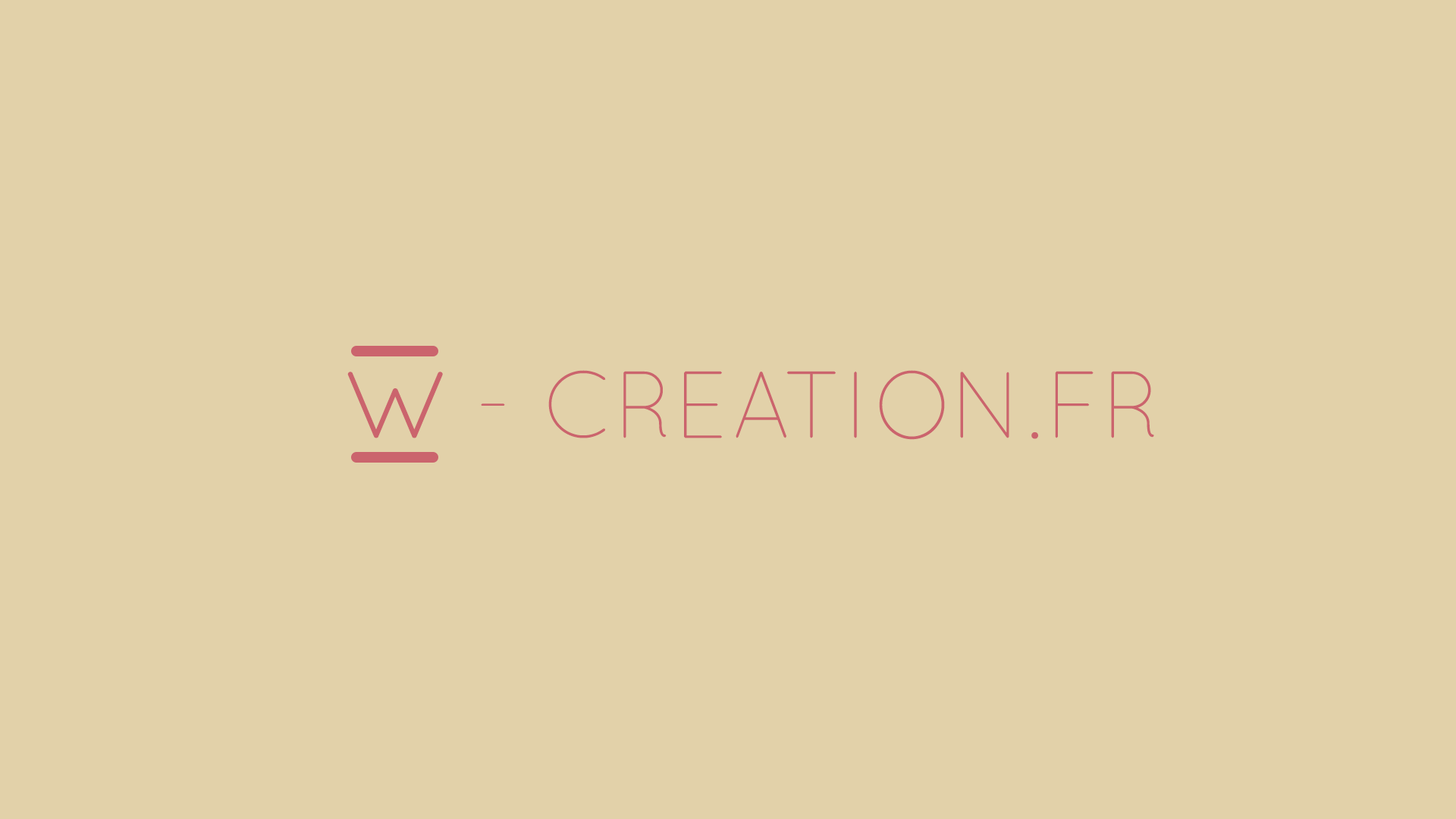
<style>
.page{position:relative;width:1456px;height:819px;background:#e2d1a9}
.page>*{position:absolute;margin:0}
.t1{font:94.8px "QuicksandLight-Regular";color:#cb646d}
.t2{font:94.8px "QuicksandBook-Regular";color:#cb646d}
</style>
<div class="page">
<p class="t1" style="left:347px;top:370px;width:807px;height:70px"><span class="t2">W </span>- CREATION.FR</p>
</div>
